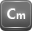
<style>
.page{position:relative;width:32px;height:32px}
.page>*{position:absolute;margin:0}
.t1{font:14px "MicrosoftYaHei-Bold";color:#ffffff}
.t2{font:11px "MicrosoftYaHei-Bold";color:#ffffff;scale:0.9 1}
</style>
<div class="page">
<p class="t1" style="left:7px;top:8px;width:19px;height:11px">C<span class="t2">m</span></p>
</div>
